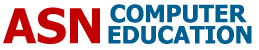
<style>
.page{position:relative;width:259px;height:50px;background:#ffffff}
.page>*{position:absolute;margin:0}
.t1{font:24px "Tahoma-Bold";color:#006092}
.t2{font:48px "Tahoma-Bold";color:#c20000}
</style>
<div class="page">
<p class="t1" style="left:110px;top:4px;width:137px;height:19px">COMPUTERR</p>
<p class="t2" style="left:3px;top:7px;width:97px;height:37px">ASN</p>
<p class="t1" style="left:108px;top:25px;width:144px;height:19px">EDUCATION</p>
</div>
